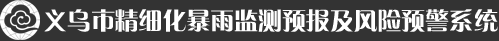
<style>
.page{position:relative;width:499px;height:41px;background:#333333}
.page>*{position:absolute;margin:0}
.t1{font:24px "GJJCQJW--GB1-0";letter-spacing:-0.005em;color:#ffffff}
</style>
<div class="page">
<p class="t1" style="left:44px;top:9px;width:454px;height:23px">义乌市精细化暴雨监测预报及风险预警系统</p>
</div>
